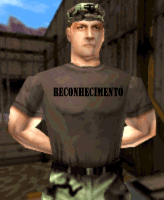
<style>
.page{position:relative;width:164px;height:200px}
.page>*{position:absolute;margin:0}
.t1{font:12.7px "Army";letter-spacing:-0.02em;color:#000000;text-transform:uppercase;font-weight:bold;scale:0.62 1}
</style>
<div class="page">
<p class="t1" style="left:53px;top:87px;width:70px;height:10px">reconhecimento</p>
</div>
